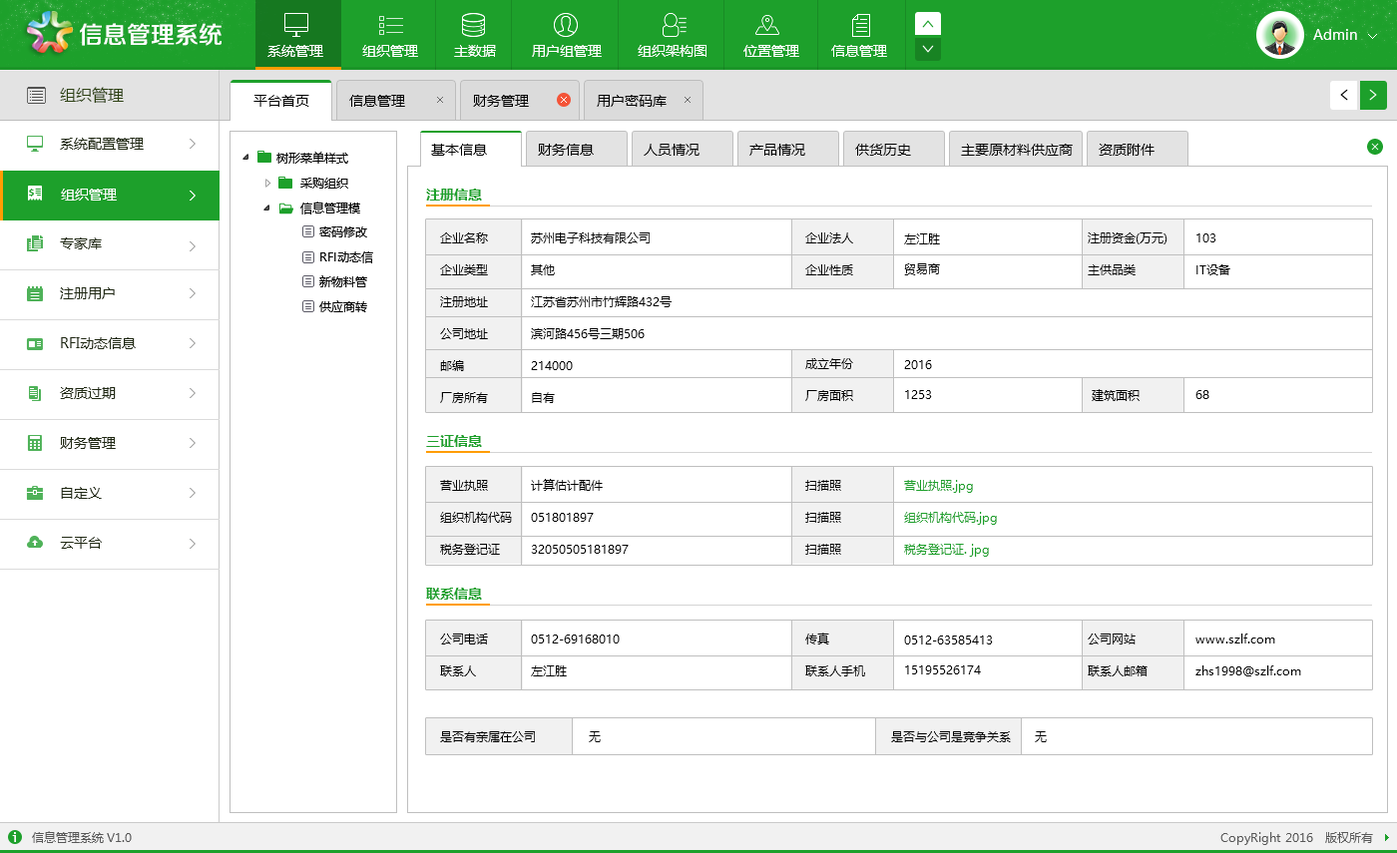
<style>
.page{position:relative;width:1397px;height:853px;background:#ffffff}
.page>*{position:absolute;margin:0}
.t1{font:14px "MicrosoftYaHei";color:#000000}
.t2{font:14px "MicrosoftYaHei-Bold";color:#1da02b}
.t3{font:12px/31.9px "MicrosoftYaHei";color:#000000}
.t4{font:12px/29.9px "MicrosoftYaHei";color:#000000}
.t5{font:12px "MicrosoftYaHei";color:#000000}
.t6{font:12px/31.9px "MicrosoftYaHei";color:#1da02b}
</style>
<div class="page">
<p class="t1" style="left:431px;top:144px;width:56px;height:12px">基本信息</p>
<p class="t1" style="left:538px;top:144px;width:56px;height:12px">财务信息</p>
<p class="t1" style="left:644px;top:144px;width:56px;height:12px">人员情况</p>
<p class="t1" style="left:750px;top:144px;width:55px;height:12px">产品情况</p>
<p class="t1" style="left:855px;top:144px;width:56px;height:12px">供货历史</p>
<p class="t1" style="left:961px;top:144px;width:112px;height:12px">主要原材料供应商</p>
<p class="t1" style="left:1099px;top:144px;width:56px;height:12px">资质附件</p>
<p class="t2" style="left:426px;top:189px;width:56px;height:12px">注册信息</p>
<p class="t3" style="left:440px;top:233px;width:48px;height:170px">企业名称<br>企业类型<br>注册地址<br>公司地址<br>邮编<br>厂房所有</p>
<p class="t3" style="left:531px;top:233px;width:141px;height:170px">苏州电子科技有限公司<br>其他<br>江苏省苏州市竹辉路432号<br>滨河路456号三期506<br>214000<br>自有</p>
<p class="t3" style="left:805px;top:233px;width:48px;height:42px">企业法人<br>企业性质</p>
<p class="t4" style="left:904px;top:234px;width:36px;height:41px">左江胜<br>贸易商</p>
<p class="t3" style="left:1088px;top:233px;width:80px;height:42px">注册资金(万元)<br>主供品类</p>
<p class="t3" style="left:1197px;top:234px;width:34px;height:41px">103<br>IT设备</p>
<p class="t3" style="left:805px;top:358px;width:48px;height:43px">成立年份<br>厂房面积</p>
<p class="t4" style="left:904px;top:360px;width:28px;height:39px">2016<br>1253</p>
<p class="t5" style="left:1092px;top:389px;width:48px;height:12px">建筑面积</p>
<p class="t5" style="left:1196px;top:390px;width:14px;height:9px">68</p>
<p class="t2" style="left:426px;top:435px;width:56px;height:12px">三证信息</p>
<p class="t3" style="left:440px;top:480px;width:72px;height:75px">营业执照<br>组织机构代码<br>税务登记证</p>
<p class="t3" style="left:531px;top:479px;width:98px;height:75px">计算估计配件<br>051801897<br>32050505181897</p>
<p class="t3" style="left:805px;top:480px;width:36px;height:75px">扫描照<br>扫描照<br>扫描照</p>
<p class="t6" style="left:904px;top:480px;width:93px;height:77px">营业执照.jpg<br>组织机构代码.jpg<br>税务登记证. jpg</p>
<p class="t2" style="left:426px;top:588px;width:56px;height:12px">联系信息</p>
<p class="t3" style="left:440px;top:634px;width:48px;height:43px">公司电话<br>联系人</p>
<p class="t3" style="left:531px;top:635px;width:89px;height:42px">0512-69168010<br>左江胜</p>
<p class="t3" style="left:805px;top:633px;width:60px;height:44px">传真<br>联系人手机</p>
<p class="t4" style="left:904px;top:636px;width:89px;height:39px">0512-63585413<br>15195526174</p>
<p class="t3" style="left:1088px;top:634px;width:60px;height:43px">公司网站<br>联系人邮箱</p>
<p class="t3" style="left:1196px;top:634px;width:106px;height:43px">www.szlf.com<br>zhs1998@szlf.com</p>
<p class="t5" style="left:440px;top:732px;width:95px;height:11px">是否有亲属在公司</p>
<p class="t5" style="left:589px;top:732px;width:12px;height:11px">无</p>
<p class="t5" style="left:891px;top:732px;width:120px;height:11px">是否与公司是竞争关系</p>
<p class="t5" style="left:1035px;top:732px;width:12px;height:11px">无</p>
</div>
